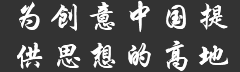
<style>
.page{position:relative;width:240px;height:72px;background:#333333}
.page>*{position:absolute;margin:0}
.t1{font:31.8px/39.8px "STXingkai";letter-spacing:0.15em;color:#ffffff}
</style>
<div class="page">
<p class="t1" style="left:17px;top:0px;width:212px;height:71px">为创意中国提<br>供思想的高地</p>
</div>
